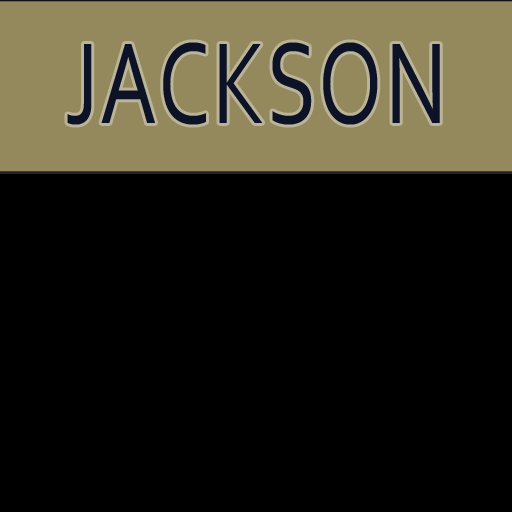
<style>
.page{position:relative;width:512px;height:512px;background:#000000}
.page>*{position:absolute;margin:0}
.t1{font:121px "Corbel";letter-spacing:0.02em;color:#0d1327;scale:0.73 1}
</style>
<div class="page">
<p class="t1" style="left:67px;top:42px;width:373px;height:83px">JACKSON</p>
</div>
